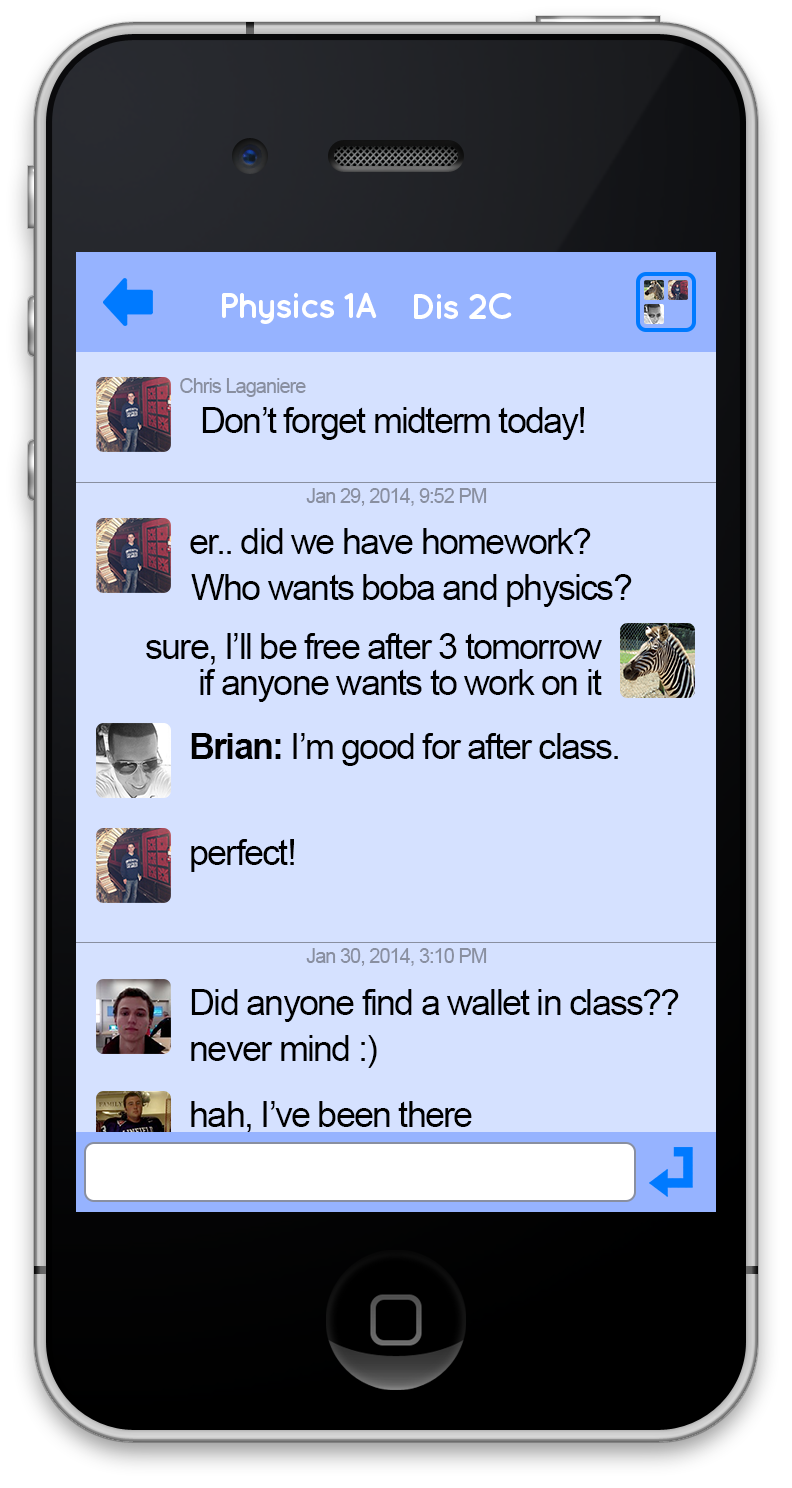
<style>
.page{position:relative;width:792px;height:1488px;background:#d5e1ff}
.page>*{position:absolute;margin:0}
.t1{font:36px "QuicksandBold-Regular";letter-spacing:-0.05em;color:#ffffff}
.t2{font:20px "ArialMT";letter-spacing:-0.05em;color:#898fa0}
.t3{font:36px "ArialMT";letter-spacing:-0.05em;color:#000000}
.t4{font:36px/36px "ArialMT";letter-spacing:-0.05em;color:#000000}
.t5{font:36px "Arial-BoldMT";letter-spacing:-0.05em;color:#000000}
</style>
<div class="page">
<p class="t1" style="left:222px;top:292px;width:155px;height:32px">Physics 1A</p>
<p class="t1" style="left:414px;top:293px;width:98px;height:26px">Dis 2C</p>
<p class="t2" style="left:180px;top:378px;width:126px;height:19px">Chris Laganiere</p>
<p class="t3" style="left:202px;top:407px;width:382px;height:33px">Don’t forget midterm today!</p>
<p class="t2" style="left:306px;top:488px;width:181px;height:18px">Jan 29, 2014, 9:52 PM</p>
<p class="t3" style="left:190px;top:528px;width:401px;height:26px">er.. did we have homework?</p>
<p class="t3" style="left:191px;top:574px;width:441px;height:33px">Who wants boba and physics?</p>
<p class="t4" style="left:146px;top:633px;width:456px;height:69px;text-align:right">sure, I’ll be free after 3 tomorrow<br>if anyone wants to work on it</p>
<p class="t3" style="left:191px;top:733px;width:427px;height:33px"><span class="t5">Brian:</span> I’m good for after class.</p>
<p class="t3" style="left:191px;top:839px;width:103px;height:33px">perfect!</p>
<p class="t2" style="left:306px;top:948px;width:181px;height:18px">Jan 30, 2014, 3:10 PM</p>
<p class="t3" style="left:191px;top:989px;width:488px;height:33px">Did anyone find a wallet in class??</p>
<p class="t3" style="left:191px;top:1035px;width:186px;height:33px">never mind :)</p>
<p class="t3" style="left:191px;top:1101px;width:281px;height:32px">hah, I’ve been there</p>
</div>
